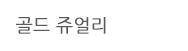
<style>
.page{position:relative;width:188px;height:51px;background:#ffffff}
.page>*{position:absolute;margin:0}
.t1{font:18px "NanumGothic";color:#5d5a5a;font-weight:bold}
</style>
<div class="page">
<p class="t1" style="left:16px;top:17px;width:90px;height:17px">골드 쥬얼리</p>
</div>
